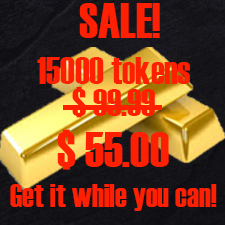
<style>
.page{position:relative;width:225px;height:225px}
.page>*{position:absolute;margin:0}
.t1{font:50px "Haettenschweiler";color:#fd2003}
.t2{font:37.5px "Haettenschweiler";color:#fd2003}
.t3{font:33.3px "Haettenschweiler";color:#fd2003}
</style>
<div class="page">
<p class="t1" style="left:79px;top:3px;width:81px;height:35px">SALE!</p>
<p class="t2" style="left:37px;top:57px;width:153px;height:27px">15000 tokens</p>
<p class="t2" style="left:72px;top:87px;width:83px;height:31px">$ 99.99</p>
<p class="t1" style="left:57px;top:129px;width:112px;height:41px">$ 55.00</p>
<p class="t3" style="left:10px;top:184px;width:207px;height:27px">Get it while you can!</p>
</div>
